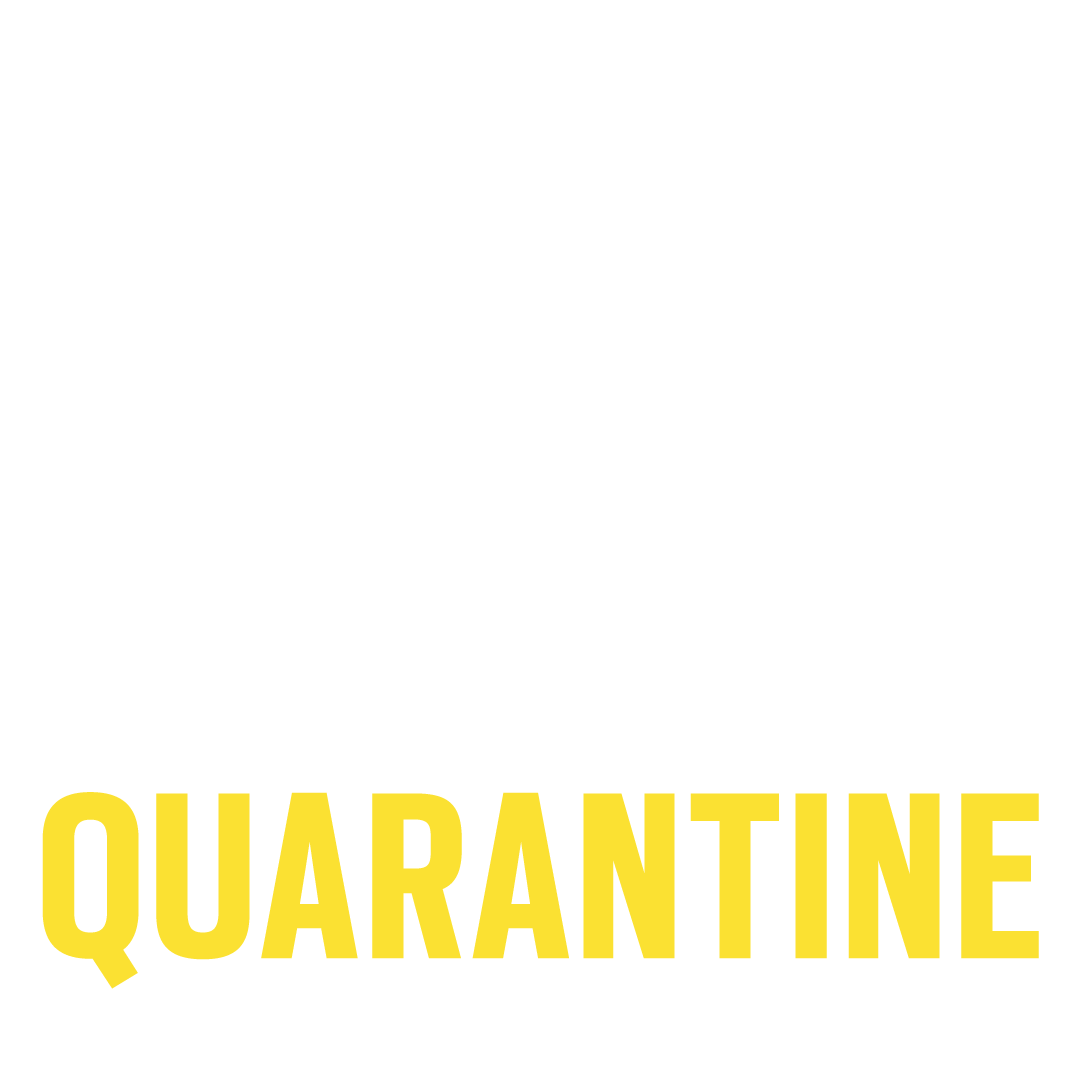
<style>
.page{position:relative;width:1080px;height:1080px;background:#ffffff}
.page>*{position:absolute;margin:0}
.t1{font:263px "ScoutCond-Bold";letter-spacing:0.025em;color:#fbe132}
</style>
<div class="page">
<p class="t1" style="left:42px;top:792px;width:997px;height:197px">QUARANTINE</p>
</div>
